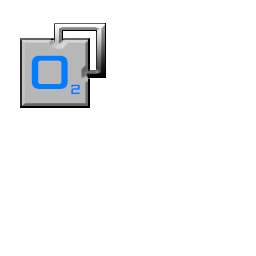
<style>
.page{position:relative;width:256px;height:256px;background:#ffffff}
.page>*{position:absolute;margin:0}
.t1{font:64.1px "Cubellan_SC";letter-spacing:0.159em;color:#007eff}
.t2{font:18px "Cubellan_SC";letter-spacing:0.159em;color:#007eff}
</style>
<div class="page">
<p class="t1" style="left:31px;top:55px;width:37px;height:34px">O</p>
<p class="t2" style="left:71px;top:84px;width:9px;height:11px">2</p>
</div>
